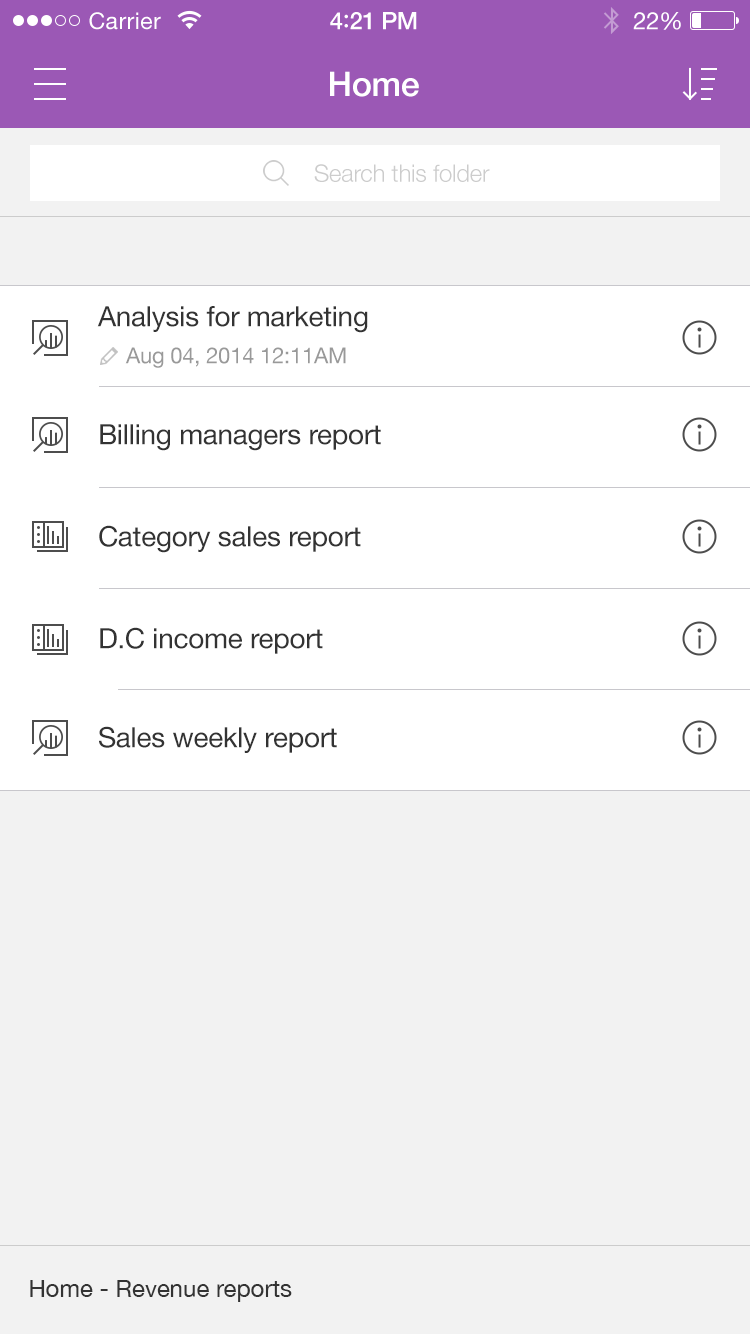
<style>
.page{position:relative;width:750px;height:1334px;background:#f2f2f2}
.page>*{position:absolute;margin:0}
.t1{font:23px "HelveticaNeue";letter-spacing:0.02em;color:#ffffff}
.t2{font:24px "HelveticaNeue-Medium";letter-spacing:-0.02em;color:#ffffff}
.t3{font:26px "Avenir-Medium";letter-spacing:-0.02em;color:#ffffff}
.t4{font:24px "HelveticaNeue";letter-spacing:-0.02em;color:#ffffff}
.t5{font:34px "HelveticaNeue-Medium";letter-spacing:-0.01em;color:#ffffff}
.t6{font:24px "HelveticaNeue-Light";letter-spacing:-0.01em;color:#cccccc}
.t7{font:28px "HelveticaNeue";letter-spacing:-0.01em;color:#333333}
.t8{font:22px "HelveticaNeue";letter-spacing:-0.01em;color:#999999}
.t9{font:24px "HelveticaNeue";color:#333333}
</style>
<div class="page">
<p class="t1" style="left:89px;top:12px;width:72px;height:18px">Carrier</p>
<p class="t2" style="left:330px;top:12px;width:87px;height:18px">4<span class="t3">:</span>21 PM</p>
<p class="t4" style="left:633px;top:12px;width:48px;height:18px">22%</p>
<p class="t5" style="left:330px;top:71px;width:89px;height:26px">Home</p>
<p class="t6" style="left:314px;top:164px;width:176px;height:18px">Search this folder</p>
<p class="t7" style="left:97px;top:306px;width:271px;height:27px">Analysis for marketing</p>
<p class="t8" style="left:125px;top:347px;width:221px;height:21px">Aug 04, 2014 12:11AM</p>
<p class="t7" style="left:100px;top:424px;width:281px;height:27px">Billing managers report</p>
<p class="t7" style="left:99px;top:525px;width:262px;height:28px">Category sales report</p>
<p class="t7" style="left:100px;top:627px;width:223px;height:27px">D.C income report</p>
<p class="t7" style="left:99px;top:726px;width:238px;height:27px">Sales weekly report</p>
<p class="t9" style="left:30px;top:1280px;width:262px;height:22px">Home - Revenue reports</p>
</div>
